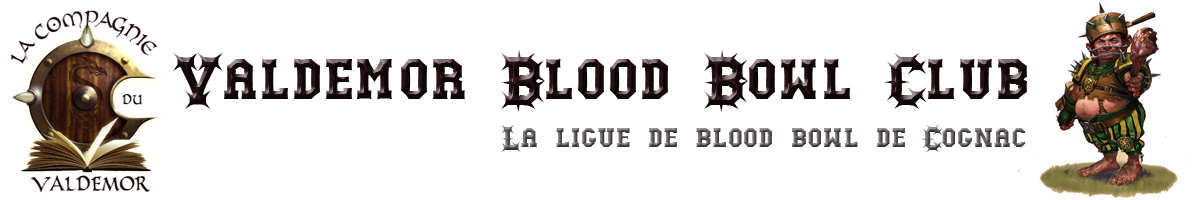
<style>
.page{position:relative;width:1200px;height:200px;background:#ffffff}
.page>*{position:absolute;margin:0}
.t1{font:58px "GutcruncherNormal"}
.t2{font:28px "GutcruncherNormal"}
</style>
<div class="page">
<p class="t1" style="left:173px;top:50px;width:854px;height:62px">Valdemor Blood Bowl Club</p>
<p class="t2" style="left:501px;top:125px;width:525px;height:27px">La ligue de blood bowl de Cognac</p>
</div>
